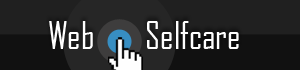
<style>
.page{position:relative;width:300px;height:70px;background:#202020}
.page>*{position:absolute;margin:0}
.t1{font:36px "AgencyFB-Reg";color:#ffffff}
</style>
<div class="page">
<p class="t1" style="left:49px;top:21px;width:44px;height:28px">Web</p>
<p class="t1" style="left:147px;top:21px;width:92px;height:28px">Selfcare</p>
</div>
